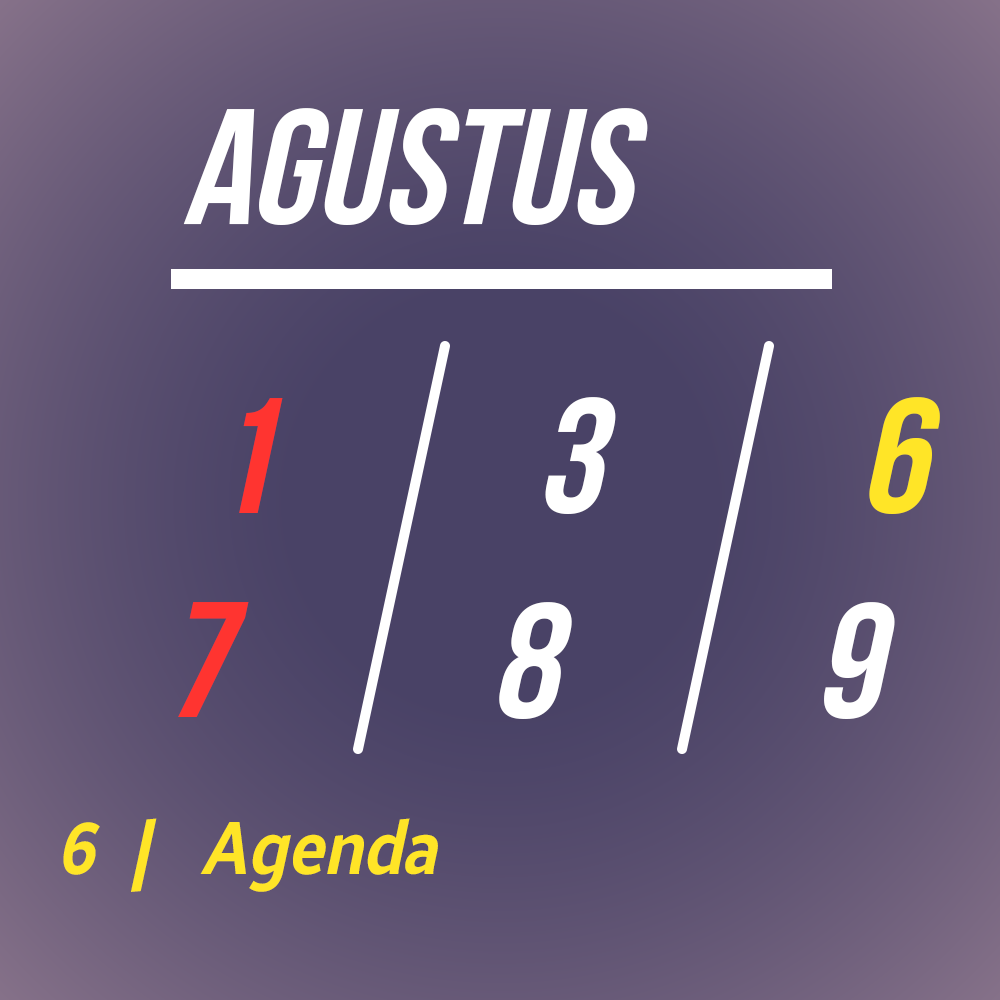
<style>
.page{position:relative;width:1000px;height:1000px}
.page>*{position:absolute;margin:0}
.t1{font:167.3px "BebasNeueBold";color:#ffffff}
.t2{font:167.3px "BebasNeueBold";color:#ff3430}
.t3{font:167.3px "BebasNeueBold";color:#ffe527}
.t4{font:75.3px "BrisaSans-Bold";color:#ffe527;scale:0.89 1}
</style>
<div class="page">
<p class="t1" style="left:183px;top:108px;width:465px;height:117px">Agustus</p>
<p class="t2" style="left:239px;top:398px;width:44px;height:115px">1</p>
<p class="t1" style="left:545px;top:397px;width:71px;height:117px">3</p>
<p class="t3" style="left:869px;top:397px;width:71px;height:117px">6</p>
<p class="t2" style="left:178px;top:602px;width:71px;height:115px">7</p>
<p class="t1" style="left:499px;top:602px;width:73px;height:117px">8</p>
<p class="t1" style="left:824px;top:602px;width:71px;height:117px">9</p>
<p class="t4" style="left:63px;top:818px;width:375px;height:74px">6 |  Agenda</p>
</div>
